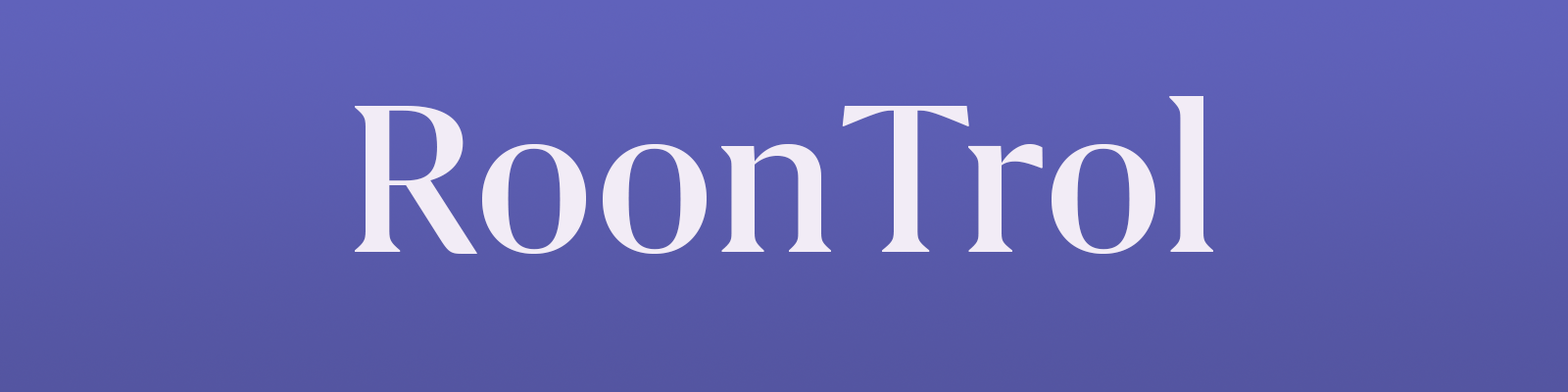
<style>
.page{position:relative;width:1568px;height:392px}
.page>*{position:absolute;margin:0}
.t1{font:243.7px "GrifoM-Medium";color:#f2ecf6}
</style>
<div class="page">
<p class="t1" style="left:355px;top:96px;width:858px;height:158px">RoonTrol</p>
</div>
